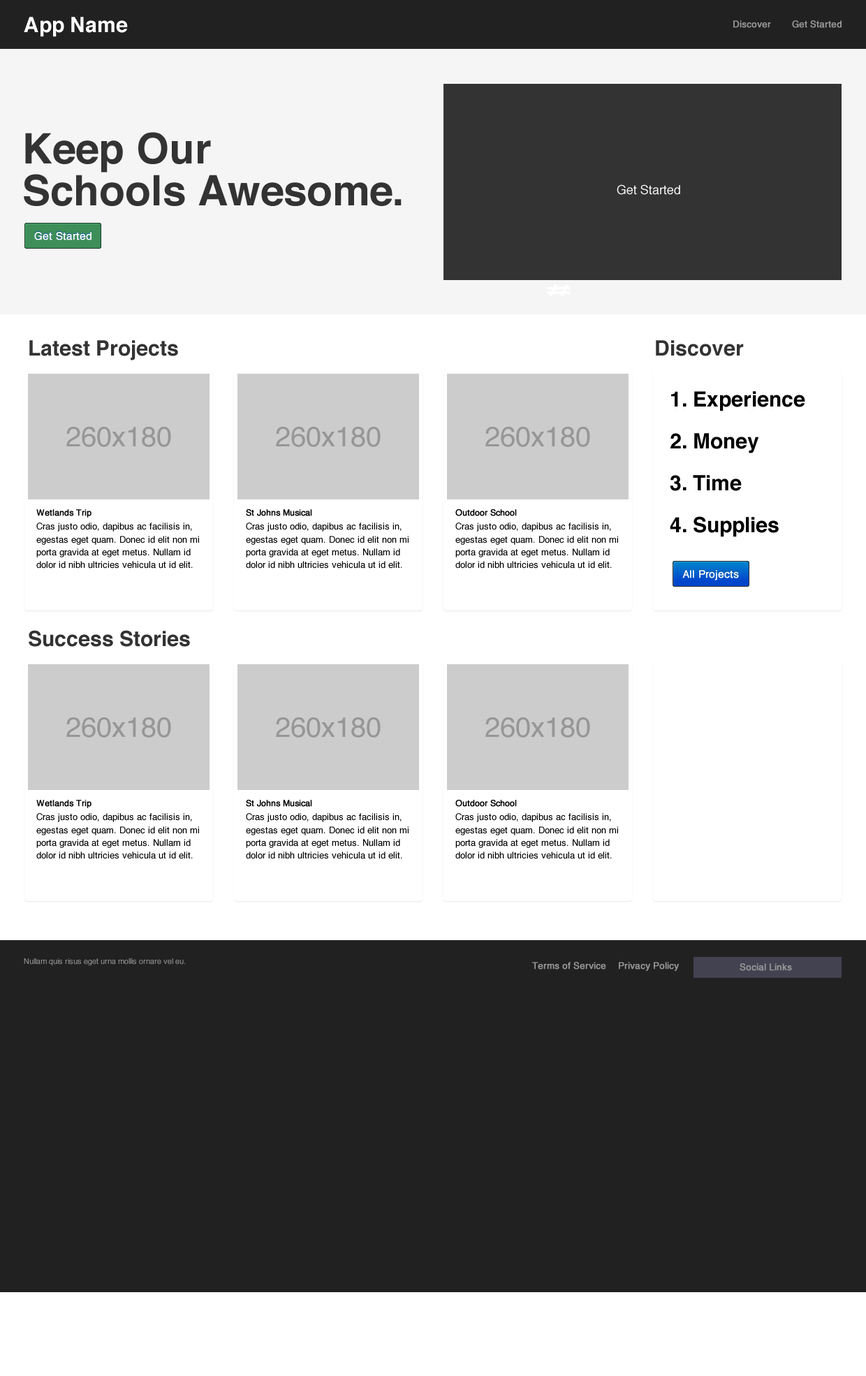
<style>
.page{position:relative;width:866px;height:1376px;background:#ffffff}
.page>*{position:absolute;margin:0}
.t1{font:21px "Helvetica-Bold";color:#ffffff}
.t2{font:9.1px "Helvetica";color:#999999;font-weight:bold}
.t3{font:41.9px/41.9px "Helvetica-Bold";color:#333333}
.t4{font:12.6px "Helvetica";color:#ffffff}
.t5{font:10.5px "Helvetica";color:#ffffff;font-weight:bold}
.t6{font:21px "Helvetica-Bold";color:#333333}
.t7{font:21px/41.9px "Helvetica-Bold";color:#000000}
.t8{font:27.9px "Helvetica";color:#969696}
.t9{font:8.4px "Helvetica";color:#000000;font-weight:bold}
.t10{font:9.1px/12.7px "Helvetica";color:#000000}
.t11{font:7.7px "Helvetica";color:#999999}
</style>
<div class="page">
<p class="t1" style="left:24px;top:17px;width:104px;height:20px">App Name</p>
<p class="t2" style="left:734px;top:20px;width:37px;height:8px">Discover</p>
<p class="t2" style="left:792px;top:20px;width:50px;height:8px">Get Started</p>
<p class="t3" style="left:24px;top:132px;width:378px;height:74px">Keep Our<br>Schools Awesome.</p>
<p class="t4" style="left:617px;top:184px;width:64px;height:11px">Get Started</p>
<p class="t5" style="left:34px;top:232px;width:58px;height:8px">Get Started</p>
<p class="t1" style="left:547px;top:284px;width:24px;height:12px">≠≠</p>
<p class="t6" style="left:29px;top:340px;width:149px;height:21px">Latest Projects</p>
<p class="t6" style="left:656px;top:340px;width:88px;height:16px">Discover</p>
<p class="t7" style="left:670px;top:391px;width:136px;height:146px">1. Experience<br>2. Money<br>3. Time<br>4. Supplies</p>
<p class="t8" style="left:66px;top:427px;width:105px;height:20px">260x180</p>
<p class="t8" style="left:276px;top:427px;width:105px;height:20px">260x180</p>
<p class="t8" style="left:486px;top:427px;width:104px;height:20px">260x180</p>
<p class="t9" style="left:36px;top:509px;width:56px;height:9px">Wetlands Trip</p>
<p class="t9" style="left:246px;top:509px;width:66px;height:7px">St Johns Musical</p>
<p class="t9" style="left:456px;top:509px;width:61px;height:7px">Outdoor School</p>
<p class="t10" style="left:36px;top:523px;width:163px;height:46px">Cras justo odio, dapibus ac facilisis in, egestas eget quam. Donec id elit non mi porta gravida at eget metus. Nullam id dolor id nibh ultricies vehicula ut id elit.</p>
<p class="t10" style="left:246px;top:523px;width:163px;height:46px">Cras justo odio, dapibus ac facilisis in, egestas eget quam. Donec id elit non mi porta gravida at eget metus. Nullam id dolor id nibh ultricies vehicula ut id elit.</p>
<p class="t10" style="left:456px;top:523px;width:162px;height:46px">Cras justo odio, dapibus ac facilisis in, egestas eget quam. Donec id elit non mi porta gravida at eget metus. Nullam id dolor id nibh ultricies vehicula ut id elit.</p>
<p class="t5" style="left:683px;top:570px;width:56px;height:11px">All Projects</p>
<p class="t6" style="left:29px;top:630px;width:161px;height:17px">Success Stories</p>
<p class="t8" style="left:66px;top:718px;width:105px;height:20px">260x180</p>
<p class="t8" style="left:276px;top:718px;width:105px;height:20px">260x180</p>
<p class="t8" style="left:486px;top:718px;width:104px;height:20px">260x180</p>
<p class="t9" style="left:36px;top:800px;width:56px;height:8px">Wetlands Trip</p>
<p class="t9" style="left:246px;top:800px;width:66px;height:7px">St Johns Musical</p>
<p class="t9" style="left:456px;top:800px;width:61px;height:7px">Outdoor School</p>
<p class="t10" style="left:36px;top:813px;width:163px;height:46px">Cras justo odio, dapibus ac facilisis in, egestas eget quam. Donec id elit non mi porta gravida at eget metus. Nullam id dolor id nibh ultricies vehicula ut id elit.</p>
<p class="t10" style="left:246px;top:813px;width:163px;height:46px">Cras justo odio, dapibus ac facilisis in, egestas eget quam. Donec id elit non mi porta gravida at eget metus. Nullam id dolor id nibh ultricies vehicula ut id elit.</p>
<p class="t10" style="left:456px;top:813px;width:162px;height:46px">Cras justo odio, dapibus ac facilisis in, egestas eget quam. Donec id elit non mi porta gravida at eget metus. Nullam id dolor id nibh ultricies vehicula ut id elit.</p>
<p class="t11" style="left:24px;top:959px;width:161px;height:7px">Nullam quis risus eget urna mollis ornare vel eu.</p>
<p class="t2" style="left:532px;top:962px;width:74px;height:8px">Terms of Service</p>
<p class="t2" style="left:619px;top:962px;width:60px;height:9px">Privacy Policy</p>
<p class="t2" style="left:740px;top:963px;width:52px;height:8px">Social Links</p>
</div>
